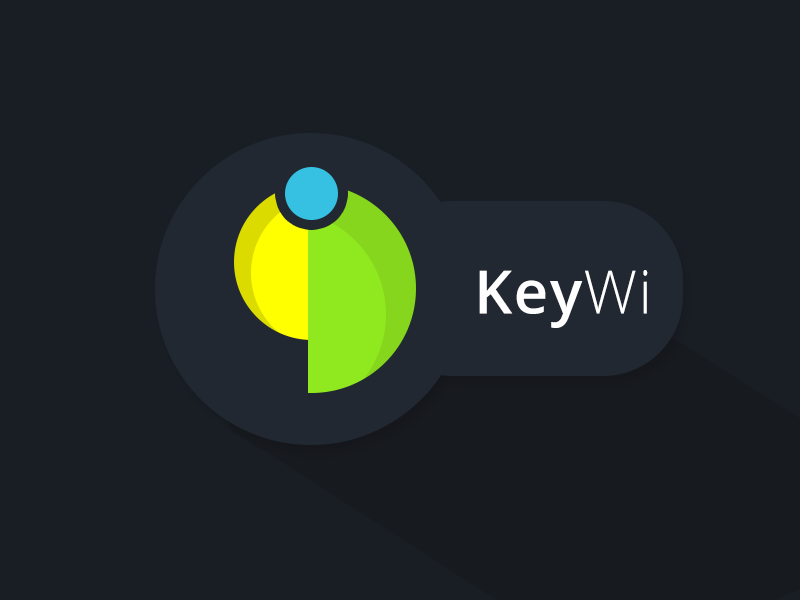
<style>
.page{position:relative;width:800px;height:600px;background:#191e25}
.page>*{position:absolute;margin:0}
.t1{font:60px "OpenSans-Semibold";letter-spacing:0.025em;color:#ffffff}
.t2{font:60px "OpenSans-Light";letter-spacing:0.025em;color:#ffffff}
</style>
<div class="page">
<p class="t1" style="left:479px;top:270px;width:169px;height:58px">Key<span class="t2">Wi</span></p>
</div>
